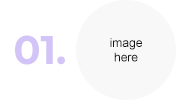
<style>
.page{position:relative;width:180px;height:100px;background:#ffffff}
.page>*{position:absolute;margin:0}
.t1{font:40px "Montserrat-Bold";color:#d3c4f8}
.t2{font:12px "ArialMT";color:#121212}
</style>
<div class="page">
<p class="t1" style="left:15px;top:35px;width:50px;height:30px">01.</p>
<p class="t2" style="left:110px;top:38px;width:32px;height:24px;text-align:center">image<br>here</p>
</div>
